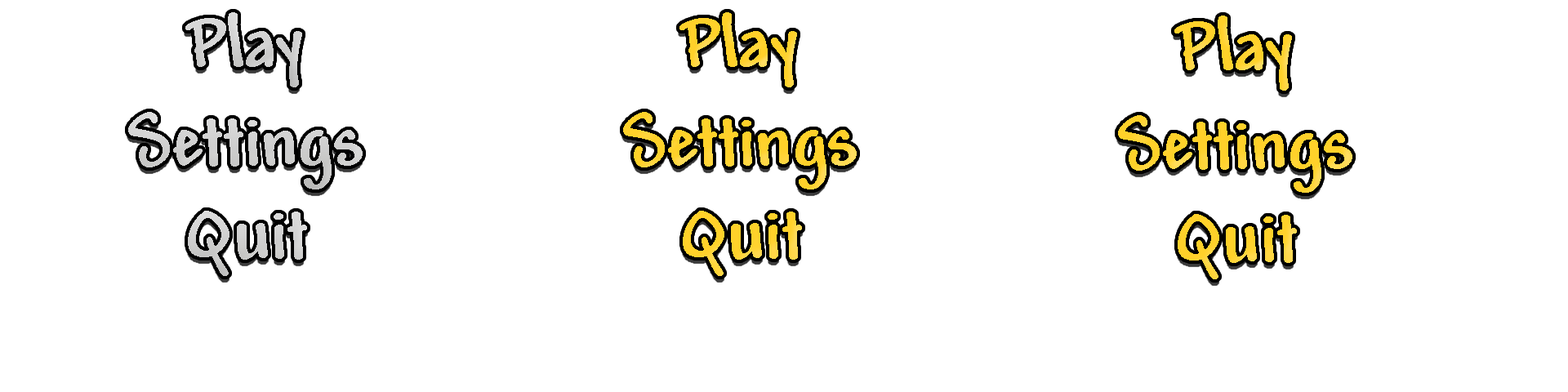
<style>
.page{position:relative;width:1568px;height:392px;background:#ffffff}
.page>*{position:absolute;margin:0}
.t1{font:78.4px "Andy-Bold";letter-spacing:-0.01em;color:#ffd12a}
</style>
<div class="page">
<p class="t1" style="left:679px;top:12px;width:118px;height:75px">Play</p>
<p class="t1" style="left:1174px;top:16px;width:118px;height:75px">Play</p>
<p class="t1" style="left:623px;top:112px;width:234px;height:77px">Settings</p>
<p class="t1" style="left:1118px;top:115px;width:234px;height:78px">Settings</p>
<p class="t1" style="left:683px;top:211px;width:119px;height:65px">Quit</p>
<p class="t1" style="left:1178px;top:214px;width:119px;height:65px">Quit</p>
</div>
